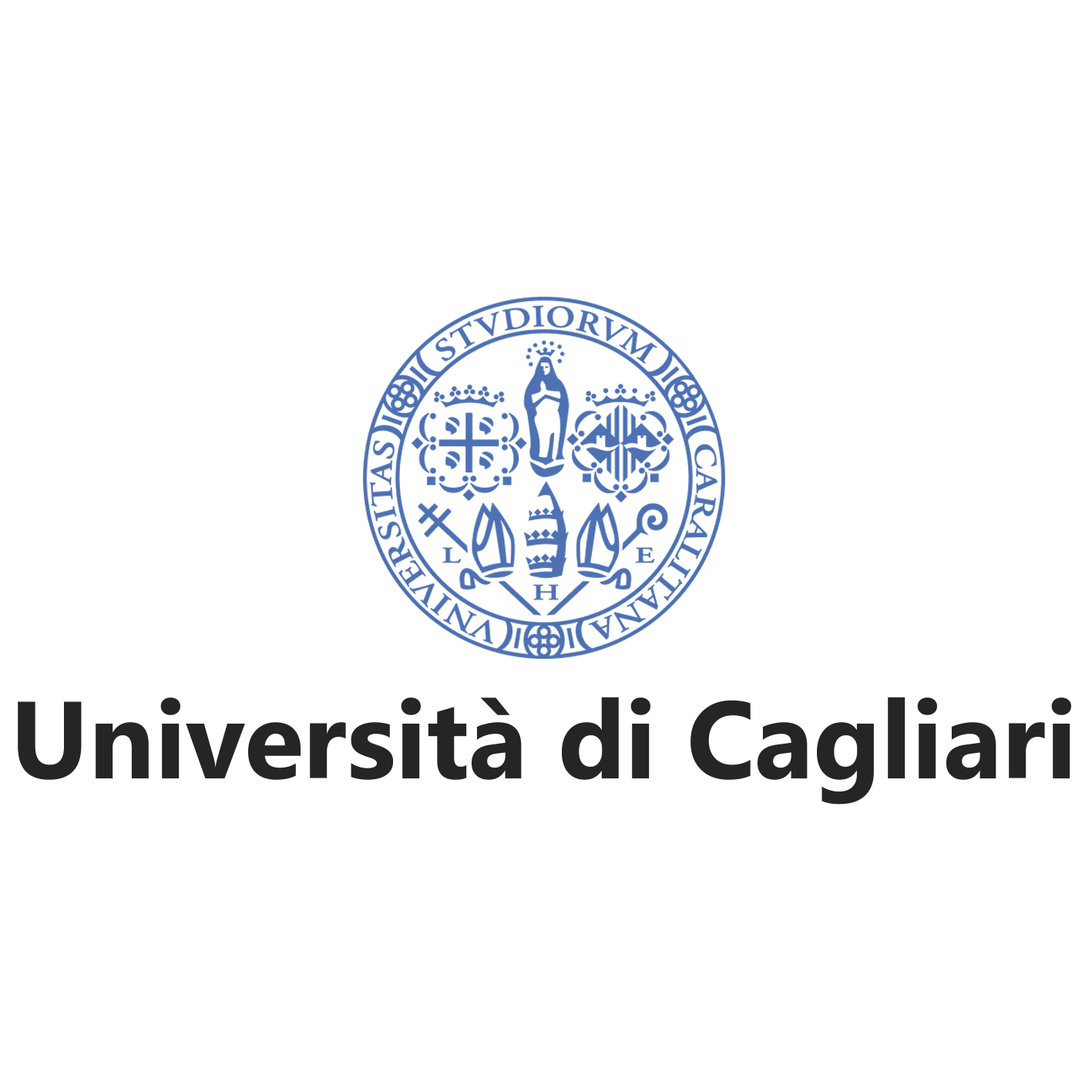
<style>
.page{position:relative;width:1092px;height:1092px;background:#ffffff}
.page>*{position:absolute;margin:0}
.t1{font:109.2px "SegoeWP-Bold";color:#252525}
</style>
<div class="page">
<p class="t1" style="left:18px;top:697px;width:1053px;height:108px">Università di Cagliari</p>
</div>
